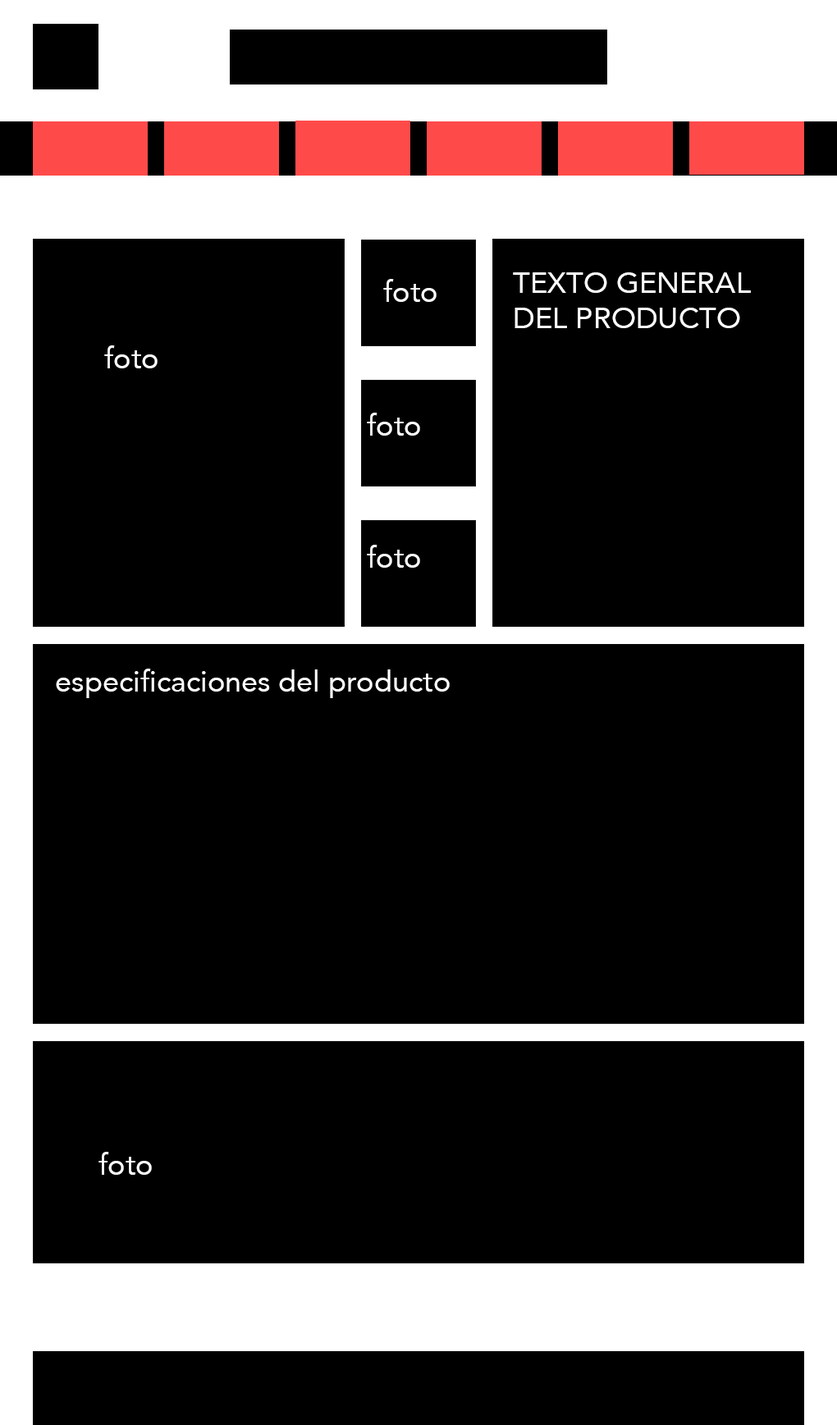
<style>
.page{position:relative;width:837px;height:1425px;background:#000000}
.page>*{position:absolute;margin:0}
.t1{font:29.5px "Avenir-Roman";color:#ffffff}
</style>
<div class="page">
<p class="t1" style="left:383px;top:279px;width:53px;height:23px">foto</p>
<p class="t1" style="left:513px;top:272px;width:238px;height:56px">TEXTO GENERAL DEL PRODUCTO</p>
<p class="t1" style="left:104px;top:345px;width:54px;height:23px">foto</p>
<p class="t1" style="left:367px;top:413px;width:53px;height:23px">foto</p>
<p class="t1" style="left:367px;top:545px;width:53px;height:23px">foto</p>
<p class="t1" style="left:56px;top:669px;width:394px;height:29px">especificaciones del producto</p>
<p class="t1" style="left:98px;top:1152px;width:54px;height:23px">foto</p>
</div>
